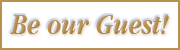
<style>
.page{position:relative;width:180px;height:50px;background:#ffffff}
.page>*{position:absolute;margin:0}
.t1{font:30px "AppleGaramond-BoldItalic";color:#b99151}
</style>
<div class="page">
<p class="t1" style="left:10px;top:15px;width:159px;height:19px">Be our Guest!</p>
</div>
